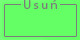
<style>
.page{position:relative;width:80px;height:40px;background:#64ff64}
.page>*{position:absolute;margin:0}
.t1{font:12.5px "MyriadPro-Regular";letter-spacing:0.2em;color:#7c7c7c}
</style>
<div class="page">
<p class="t1" style="left:24px;top:0px;width:33px;height:9px">Usuń</p>
</div>
